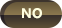
<style>
.page{position:relative;width:62px;height:28px}
.page>*{position:absolute;margin:0}
.t1{font:14px "SegoeUI-Bold";color:#ffffe1}
</style>
<div class="page">
<p class="t1" style="left:22px;top:8px;width:20px;height:11px">NO</p>
</div>
